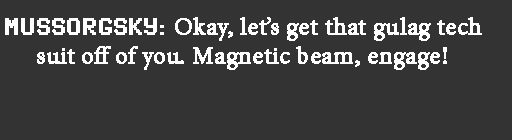
<style>
.page{position:relative;width:512px;height:140px;background:#333333}
.page>*{position:absolute;margin:0}
.t1{font:24px "MinionPro-Regular";color:#ffffff;font-weight:bold}
.t2{font:24px "SynchroLET";color:#ffffff;font-weight:bold}
</style>
<div class="page">
<p class="t1" style="left:5px;top:17px;width:477px;height:53px"><span class="t2">MUSSORGSKY: </span>Okay, let’s get that gulag tech<br>     suit off of you. Magnetic beam, engage!</p>
</div>
